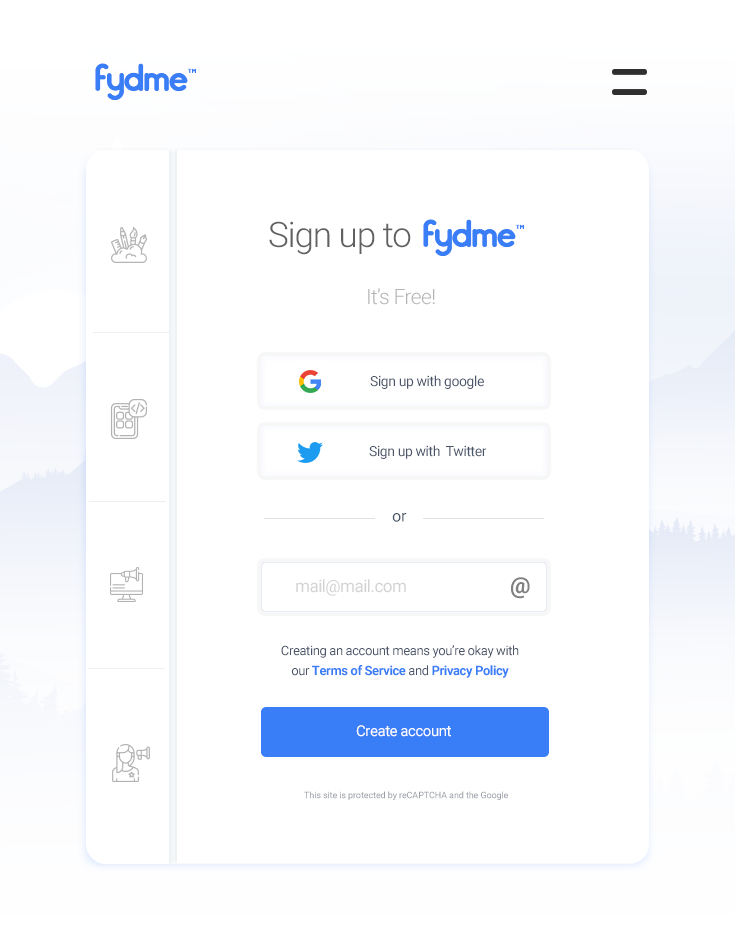
<style>
.page{position:relative;width:735px;height:931px;background:#ffffff}
.page>*{position:absolute;margin:0}
.t1{font:35px "Roboto-Light";letter-spacing:-0.03em;color:#616160}
.t2{font:21px "Roboto-Light";letter-spacing:-0.03em;color:#b2b2b2}
.t3{font:14px "Roboto-Regular";letter-spacing:-0.03em;color:#4a5569}
.t4{font:17px "Roboto-Regular";letter-spacing:-0.03em;color:#d3d3d3}
.t5{font:23px "Roboto-Bold";letter-spacing:-0.03em;color:#818181}
.t6{font:13px/20px "Roboto-Regular";letter-spacing:-0.03em;color:#4a5569}
.t7{font:13px/20px "Roboto-Bold";letter-spacing:-0.03em;color:#397ef7}
.t8{font:15px "Roboto-Regular";letter-spacing:-0.03em;color:#ffffff}
</style>
<div class="page">
<p class="t1" style="left:269px;top:221px;width:142px;height:34px">Sign up to</p>
<p class="t2" style="left:368px;top:288px;width:67px;height:17px">It’s Free!</p>
<p class="t3" style="left:370px;top:375px;width:114px;height:14px">Sign up with google</p>
<p class="t3" style="left:369px;top:445px;width:118px;height:14px">Sign up with  Twitter</p>
<p class="t4" style="left:296px;top:579px;width:110px;height:17px">mail@mail.com</p>
<p class="t5" style="left:511px;top:577px;width:19px;height:22px">@</p>
<p class="t6" style="left:281px;top:645px;width:238px;height:33px;text-align:center">Creating an account means you’re okay with<br>our <span class="t7">Terms of Service</span> and <span class="t7">Privacy Policy</span></p>
<p class="t8" style="left:356px;top:725px;width:95px;height:12px">Create account</p>
</div>
